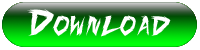
<style>
.page{position:relative;width:200px;height:50px;background:#ffffff}
.page>*{position:absolute;margin:0}
.t1{font:30px "FightingSpiritTBS";color:#ffffff}
</style>
<div class="page">
<p class="t1" style="left:27px;top:9px;width:144px;height:28px">Download</p>
</div>
